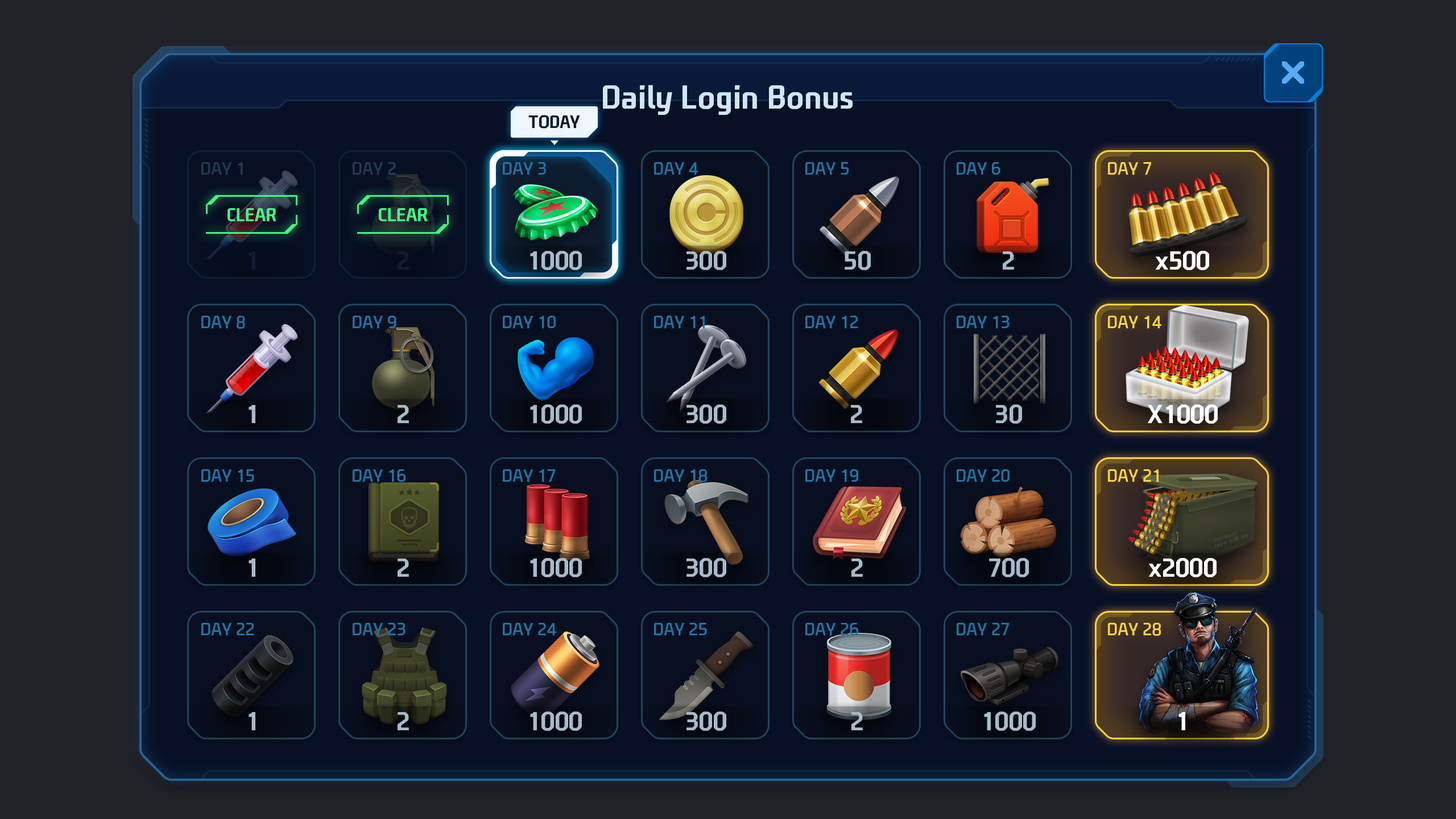
<style>
.page{position:relative;width:1456px;height:819px;background:#212227}
.page>*{position:absolute;margin:0}
.t1{font:31.8px "NEXONFootballGothicB";color:#cfe7f7}
.t2{font:17.2px "NEXONFootballGothicB";color:#0d1b2e;text-transform:uppercase}
.t3{font:17.1px/153.6px "NEXONFootballGothicL";color:#2273a2;text-transform:uppercase}
.t4{font:17.1px/153.6px "NEXONFootballGothicL";color:#243950;text-transform:uppercase}
.t5{font:17.1px/153.6px "NEXONFootballGothicL";color:#ffd539;text-transform:uppercase}
.t6{font:18.1px "NEXONFootballGothicB";color:#3eff85;text-transform:uppercase}
.t7{font:25px "NEXONFootballGothicB";color:#101c32;text-transform:uppercase}
.t8{font:25px "NEXONFootballGothicB";color:#a7bbca;text-transform:uppercase}
.t9{font:25px "NEXONFootballGothicB";color:#ffffff}
.t10{font:25px "NEXONFootballGothicB";color:#ffffff;text-transform:uppercase}
</style>
<div class="page">
<p class="t1" style="left:603px;top:85px;width:250px;height:30px">Daily Login Bonus</p>
<p class="t2" style="left:528px;top:115px;width:52px;height:14px">Today</p>
<p class="t3" style="left:353px;top:162px;width:53px;height:474px"><span class="t4">Day 2<br></span>Day 9<br>Day 16<br>Day 23</p>
<p class="t3" style="left:654px;top:162px;width:53px;height:474px">Day 4<br>Day 11<br>Day 18<br>Day 25</p>
<p class="t3" style="left:805px;top:162px;width:53px;height:474px">Day 5<br>Day 12<br>Day 19<br>Day 26</p>
<p class="t3" style="left:957px;top:162px;width:53px;height:474px">Day 6<br>Day 13<br>Day 20<br>Day 27</p>
<p class="t5" style="left:1108px;top:162px;width:53px;height:474px">Day 7<br>Day 14<br>Day 21<br>Day 28</p>
<p class="t6" style="left:227px;top:208px;width:49px;height:13px">Clear</p>
<p class="t6" style="left:379px;top:208px;width:49px;height:13px">Clear</p>
<p class="t7" style="left:249px;top:251px;width:6px;height:19px">1</p>
<p class="t7" style="left:398px;top:251px;width:11px;height:19px">2</p>
<p class="t8" style="left:530px;top:251px;width:52px;height:19px">1000</p>
<p class="t8" style="left:686px;top:251px;width:40px;height:19px">300</p>
<p class="t8" style="left:845px;top:251px;width:26px;height:19px">50</p>
<p class="t8" style="left:1003px;top:251px;width:11px;height:19px">2</p>
<p class="t9" style="left:1155px;top:251px;width:54px;height:19px">x500</p>
<p class="t8" style="left:249px;top:405px;width:6px;height:18px">1</p>
<p class="t8" style="left:398px;top:405px;width:11px;height:18px">2</p>
<p class="t8" style="left:530px;top:404px;width:52px;height:20px">1000</p>
<p class="t8" style="left:686px;top:404px;width:40px;height:20px">300</p>
<p class="t8" style="left:851px;top:405px;width:11px;height:18px">2</p>
<p class="t8" style="left:996px;top:404px;width:26px;height:20px">30</p>
<p class="t10" style="left:1148px;top:404px;width:70px;height:20px">x1000</p>
<p class="t8" style="left:530px;top:558px;width:52px;height:19px">1000</p>
<p class="t8" style="left:686px;top:558px;width:40px;height:19px">300</p>
<p class="t8" style="left:989px;top:558px;width:40px;height:19px">700</p>
<p class="t9" style="left:1148px;top:558px;width:69px;height:19px">x2000</p>
<p class="t8" style="left:249px;top:559px;width:6px;height:18px">1</p>
<p class="t8" style="left:398px;top:559px;width:11px;height:18px">2</p>
<p class="t8" style="left:851px;top:559px;width:12px;height:18px">2</p>
<p class="t8" style="left:249px;top:712px;width:6px;height:18px">1</p>
<p class="t8" style="left:398px;top:712px;width:11px;height:18px">2</p>
<p class="t8" style="left:530px;top:711px;width:52px;height:20px">1000</p>
<p class="t8" style="left:686px;top:711px;width:40px;height:20px">300</p>
<p class="t8" style="left:851px;top:712px;width:12px;height:18px">2</p>
<p class="t8" style="left:984px;top:711px;width:52px;height:20px">1000</p>
<p class="t9" style="left:1178px;top:712px;width:7px;height:18px">1</p>
</div>
